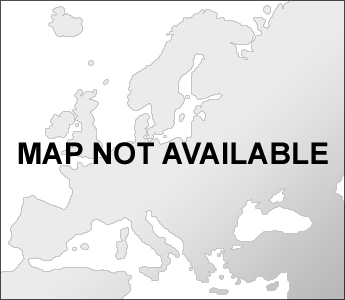
<style>
.page{position:relative;width:345px;height:300px;background:#ffffff}
.page>*{position:absolute;margin:0}
.t1{font:30px "Arial-BoldMT";color:#000000}
</style>
<div class="page">
<p class="t1" style="left:18px;top:142px;width:310px;height:23px">MAP NOT AVAILABLE</p>
</div>
